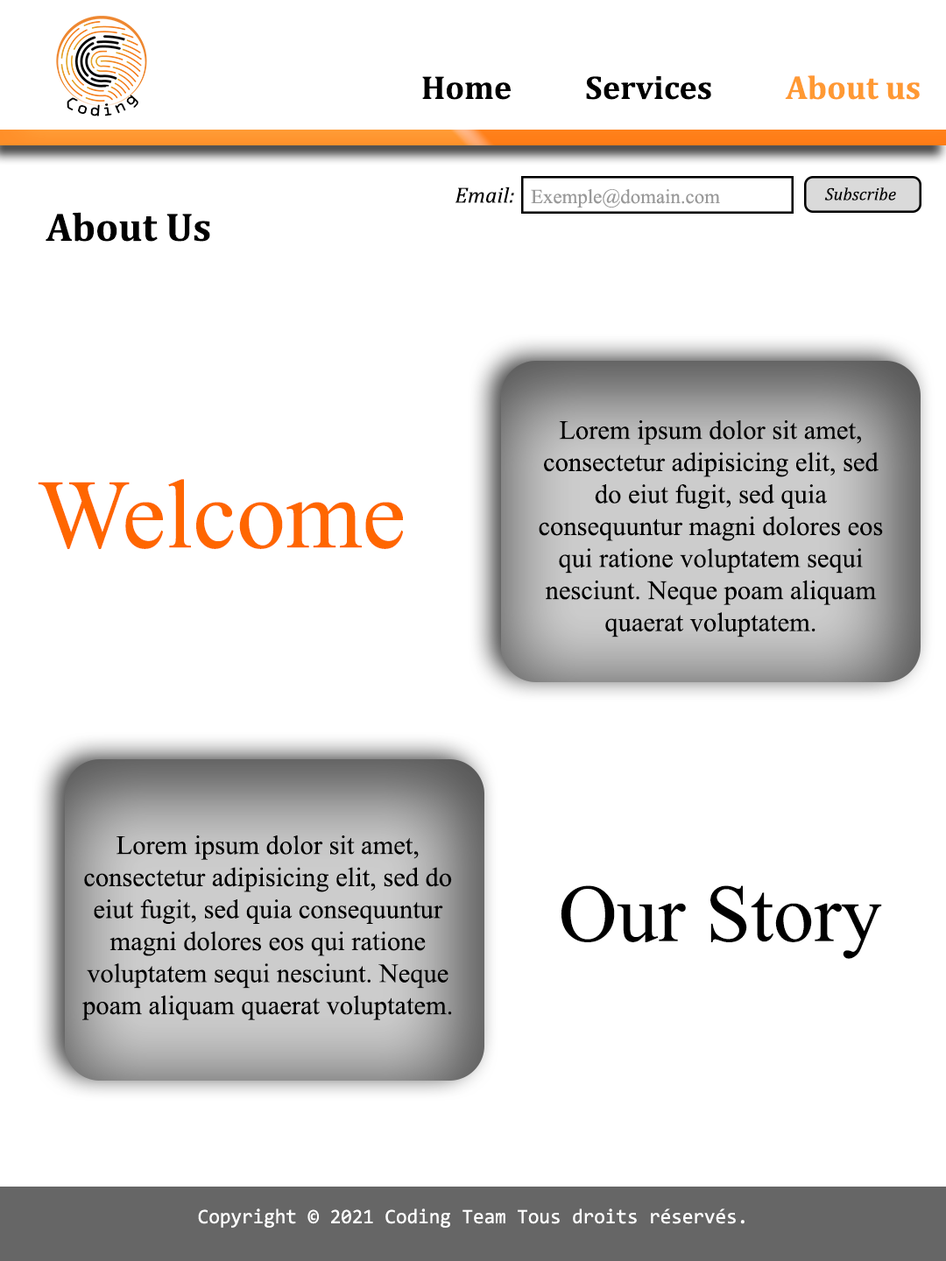
<style>
.page{position:relative;width:946px;height:1261px;background:#ffffff}
.page>*{position:absolute;margin:0}
.t1{font:33.4px "Cambria-Bold";color:#000000}
.t2{font:33.4px "Cambria-Bold";color:#ff9933}
.t3{font:22.2px "Cambria-Italic";color:#000000}
.t4{font:20px "TimesNewRomanPSMT";color:#999999}
.t5{font:17.8px "Cambria-Italic";color:#000000}
.t6{font:40px "Cambria-Bold";color:#000000}
.t7{font:26.7px/32px "TimesNewRomanPSMT";color:#000000}
.t8{font:98.2px "TimesNewRomanPSMT";color:#ff6600}
.t9{font:81.3px "TimesNewRomanPSMT";color:#000000}
.t10{font:20.7px "Consolas";color:#ffffff;scale:0.97 1}
</style>
<div class="page">
<p class="t1" style="left:422px;top:75px;width:497px;height:25px">Home          Services          <span class="t2">About us</span></p>
<p class="t3" style="left:454px;top:187px;width:60px;height:16px">Email:</p>
<p class="t4" style="left:531px;top:189px;width:189px;height:19px">Exemple@domain.com</p>
<p class="t5" style="left:824px;top:187px;width:72px;height:14px">Subscribe</p>
<p class="t6" style="left:46px;top:212px;width:164px;height:30px">About Us</p>
<p class="t7" style="left:539px;top:420px;width:344px;height:217px;text-align:center">Lorem ipsum dolor sit amet, consectetur adipisicing elit, sed do eiut fugit, sed quia consequuntur magni dolores eos qui ratione voluptatem sequi nesciunt. Neque poam aliquam quaerat voluptatem.</p>
<p class="t8" style="left:38px;top:479px;width:365px;height:70px">Welcome</p>
<p class="t7" style="left:82px;top:835px;width:370px;height:185px;text-align:center">Lorem ipsum dolor sit amet, consectetur adipisicing elit, sed do eiut fugit, sed quia consequuntur magni dolores eos qui ratione voluptatem sequi nesciunt. Neque poam aliquam quaerat voluptatem.</p>
<p class="t9" style="left:560px;top:885px;width:322px;height:74px">Our Story</p>
<p class="t10" style="left:198px;top:1208px;width:546px;height:20px">Copyright © 2021 Coding Team Tous droits réservés.</p>
</div>
